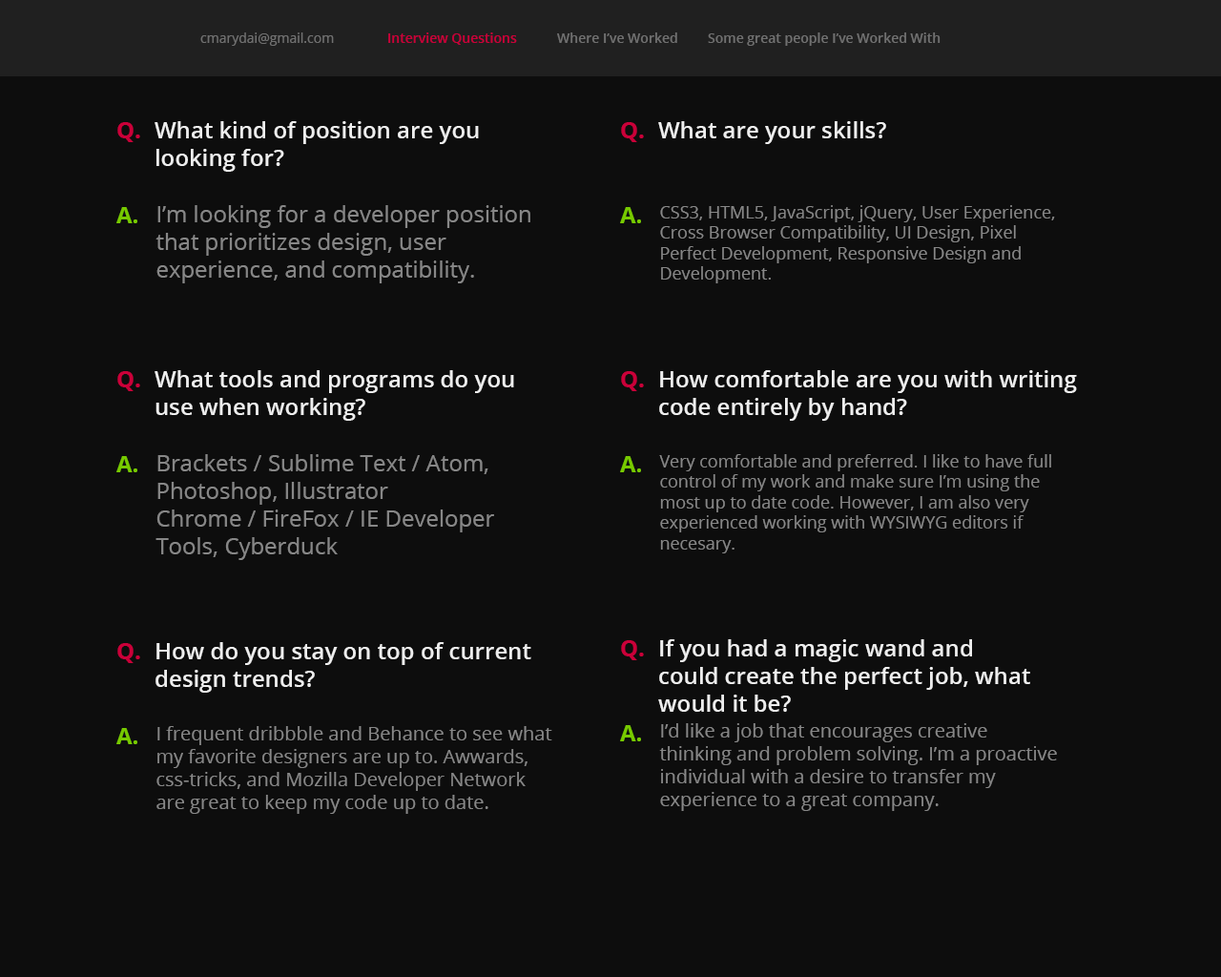
<style>
.page{position:relative;width:1221px;height:977px;background:#0d0d0d}
.page>*{position:absolute;margin:0}
.t1{font:13.4px "OpenSans";color:#707070}
.t2{font:13.4px "OpenSans-Semibold";color:#ca0039}
.t3{font:13.4px "OpenSans-Semibold";color:#707070}
.t4{font:22.9px "OpenSans-Bold";color:#ca0039}
.t5{font:22.9px "OpenSans-Semibold";color:#eeeeee}
.t6{font:22.9px "OpenSans-Bold";color:#77ca00}
.t7{font:22.9px "OpenSans";color:#878787}
.t8{font:17.2px "OpenSans";color:#878787}
.t9{font:19.1px "OpenSans";color:#878787}
</style>
<div class="page">
<p class="t1" style="left:200px;top:32px;width:134px;height:14px">cmarydai@gmail.com</p>
<p class="t2" style="left:388px;top:32px;width:129px;height:13px">Interview Questions</p>
<p class="t3" style="left:557px;top:32px;width:120px;height:11px">Where I’ve Worked</p>
<p class="t3" style="left:708px;top:32px;width:232px;height:14px">Some great people I’ve Worked With</p>
<p class="t4" style="left:117px;top:122px;width:23px;height:20px">Q.</p>
<p class="t5" style="left:155px;top:121px;width:324px;height:51px;text-align:right">What kind of position are you<br>looking for?</p>
<p class="t4" style="left:621px;top:122px;width:23px;height:20px">Q.</p>
<p class="t5" style="left:658px;top:121px;width:228px;height:23px">What are your skills?</p>
<p class="t6" style="left:116px;top:207px;width:21px;height:16px">A.</p>
<p class="t7" style="left:155px;top:205px;width:375px;height:78px;text-align:right">I’m looking for a developer position that prioritizes design, user experience, and compatibility.</p>
<p class="t6" style="left:620px;top:207px;width:21px;height:16px">A.</p>
<p class="t8" style="left:660px;top:205px;width:395px;height:78px;text-align:right">CSS3, HTML5, JavaScript, jQuery, User Experience, Cross Browser Compatibility, UI Design, Pixel Perfect Development, Responsive Design and Development.</p>
<p class="t4" style="left:117px;top:371px;width:23px;height:20px">Q.</p>
<p class="t5" style="left:155px;top:370px;width:359px;height:51px;text-align:right">What tools and programs do you<br>use when working?</p>
<p class="t4" style="left:621px;top:371px;width:23px;height:20px">Q.</p>
<p class="t5" style="left:659px;top:370px;width:418px;height:51px;text-align:right">How comfortable are you with writing<br>code entirely by hand?</p>
<p class="t6" style="left:116px;top:456px;width:21px;height:16px">A.</p>
<p class="t7" style="left:155px;top:454px;width:339px;height:106px;text-align:right">Brackets / Sublime Text / Atom, Photoshop, Illustrator<br>Chrome / FireFox / IE Developer Tools, Cyberduck</p>
<p class="t6" style="left:620px;top:456px;width:21px;height:16px">A.</p>
<p class="t8" style="left:659px;top:454px;width:392px;height:99px;text-align:right">Very comfortable and preferred. I like to have full control of my work and make sure I’m using the most up to date code. However, I am also very experienced working with WYSIWYG editors if necesary.</p>
<p class="t5" style="left:155px;top:642px;width:376px;height:50px;text-align:right">How do you stay on top of current<br>design trends?</p>
<p class="t4" style="left:621px;top:640px;width:23px;height:20px">Q.</p>
<p class="t5" style="left:658px;top:639px;width:372px;height:73px;text-align:right">If you had a magic wand and<br>could create the perfect job, what<br>would it be?</p>
<p class="t4" style="left:117px;top:643px;width:23px;height:20px">Q.</p>
<p class="t9" style="left:156px;top:726px;width:396px;height:88px;text-align:right">I frequent dribbble and Behance to see what my favorite designers are up to. Awwards, css-tricks, and Mozilla Developer Network are great to keep my code up to date.</p>
<p class="t6" style="left:620px;top:725px;width:21px;height:16px">A.</p>
<p class="t9" style="left:659px;top:723px;width:398px;height:88px;text-align:right">I’d like a job that encourages creative thinking and problem solving. I’m a proactive individual with a desire to transfer my experience to a great company.</p>
<p class="t6" style="left:116px;top:728px;width:21px;height:16px">A.</p>
</div>
